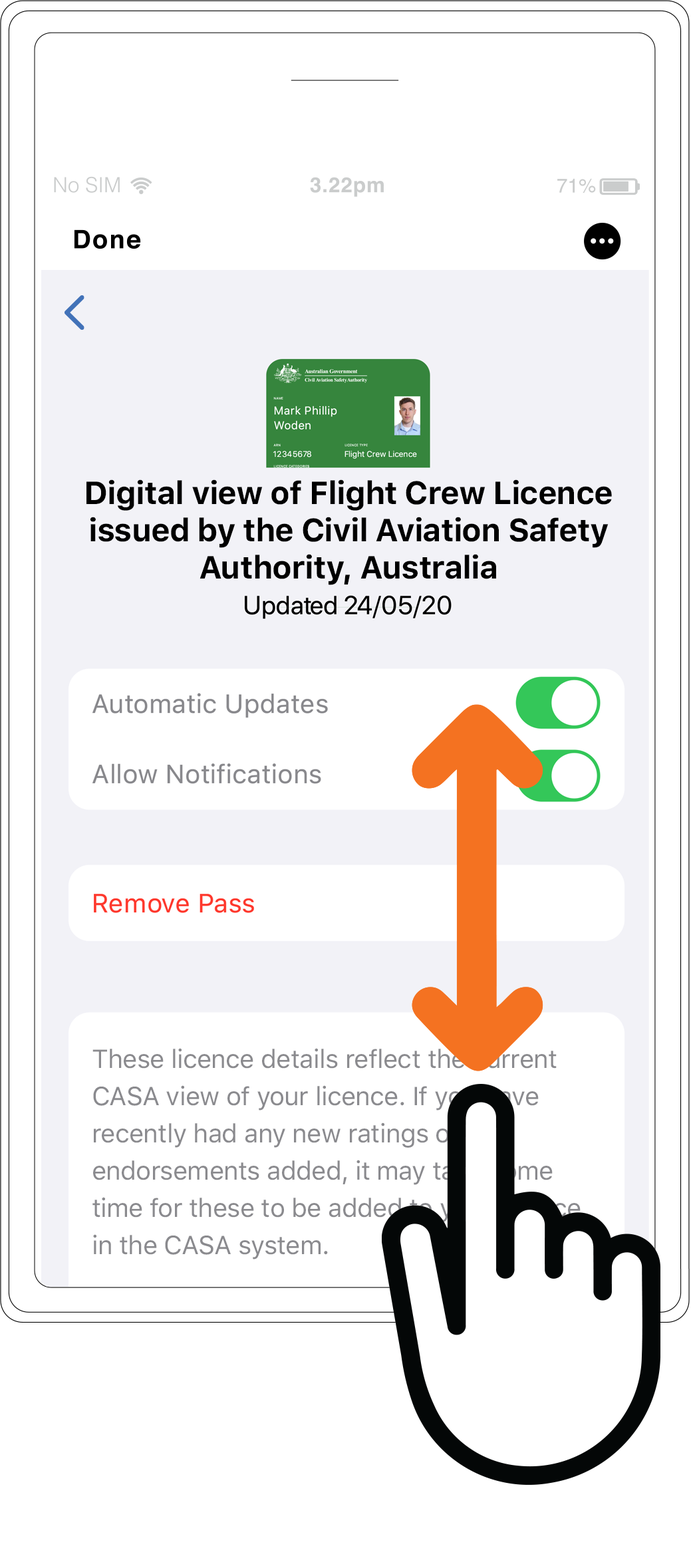
<style>
.page{position:relative;width:691px;height:1568px;background:#ffffff}
.page>*{position:absolute;margin:0}
.t1{font:31.9px/37.2px "SFUIText-Bold";letter-spacing:-0.02em;color:#000000}
.t2{font:25.9px/37.2px "SFUIText-Regular";letter-spacing:-0.02em;color:#8a8a8e}
</style>
<div class="page">
<p class="t1" style="left:86px;top:479px;width:526px;height:106px;text-align:center">Digital view of Flight Crew Licence issued by the Civil Aviation Safety Authority, Australia</p>
<p class="t2" style="left:92px;top:1048px;width:489px;height:211px">These licence details reflect the current CASA view of your licence. If you have recently had any new ratings or endorsements added, it may take some time for these to be added to your licence in the CASA system.</p>
</div>
